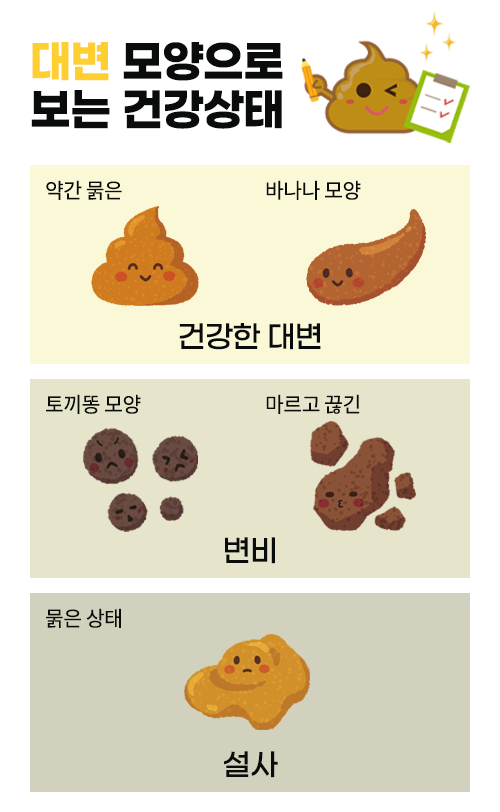
<style>
.page{position:relative;width:500px;height:812px;background:#ffffff}
.page>*{position:absolute;margin:0}
.t1{font:44.3px/48.1px "GmarketSansTTFBold";letter-spacing:-0.02em;color:#0a0c0b;scale:0.97 1}
.t2{font:44.3px/48.1px "GmarketSansTTFBold";letter-spacing:-0.02em;color:#ffce30;scale:0.97 1}
.t3{font:21px "SpoqaHanSansNeo-Regular";letter-spacing:-0.02em;color:#0a0c0b}
.t4{font:30px "GmarketSansTTFMedium";letter-spacing:-0.02em;color:#0a0c0b;scale:0.97 1}
</style>
<div class="page">
<p class="t1" style="left:31px;top:42px;width:252px;height:87px"><span class="t2">대변</span> 모양으로 <br>보는 건강상태</p>
<p class="t3" style="left:46px;top:180px;width:76px;height:20px">약간 묽은</p>
<p class="t3" style="left:266px;top:180px;width:95px;height:20px">바나나 모양</p>
<p class="t4" style="left:179px;top:323px;width:142px;height:27px">건강한 대변</p>
<p class="t3" style="left:46px;top:394px;width:95px;height:20px">토끼똥 모양</p>
<p class="t3" style="left:266px;top:394px;width:94px;height:20px">마르고 끊긴</p>
<p class="t4" style="left:225px;top:537px;width:50px;height:27px">변비</p>
<p class="t3" style="left:46px;top:608px;width:75px;height:20px">묽은 상태</p>
<p class="t4" style="left:224px;top:751px;width:54px;height:27px">설사</p>
</div>
